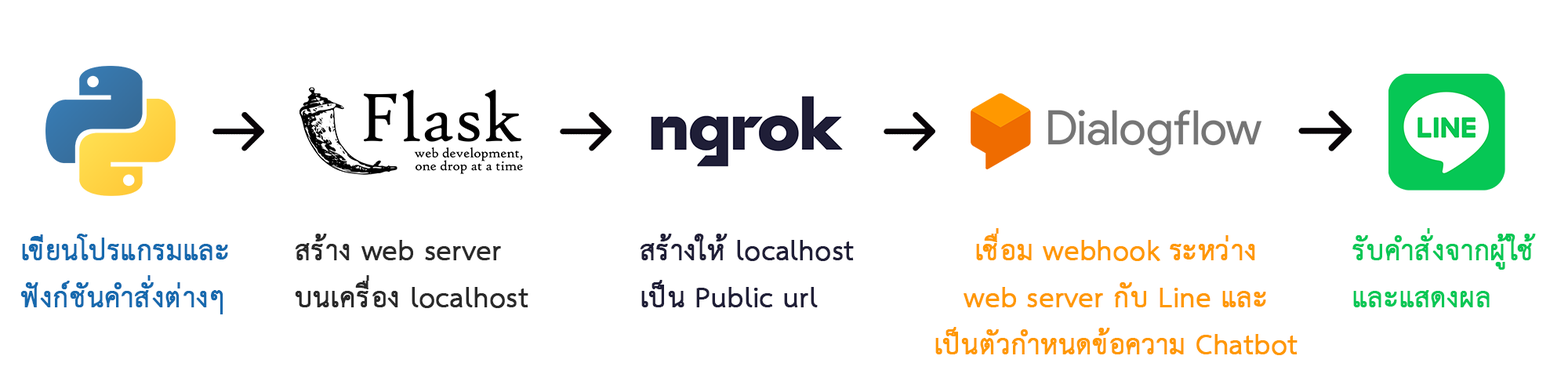
<style>
.page{position:relative;width:1568px;height:392px;background:#ffffff}
.page>*{position:absolute;margin:0}
.t1{font:39.2px "THSarabunNew";color:#1669ae;font-weight:bold}
.t2{font:39.2px "THSarabunNew";color:#292929;font-weight:bold}
.t3{font:39.2px "THSarabunNew";color:#1f1e37;font-weight:bold}
.t4{font:39.2px "THSarabunNew";color:#ff9800;font-weight:bold}
.t5{font:39.2px "THSarabunNew";color:#06c755;font-weight:bold}
</style>
<div class="page">
<p class="t1" style="left:20px;top:234px;width:208px;height:80px">เขียนโปรแกรมและ<br>ฟังก์ชันคำสั่งต่างๆ</p>
<p class="t2" style="left:295px;top:234px;width:233px;height:74px">สร้าง web server<br>บนเครื่อง localhost</p>
<p class="t3" style="left:641px;top:234px;width:213px;height:73px">สร้างให้ localhost <br>เป็น Public url</p>
<p class="t4" style="left:935px;top:228px;width:363px;height:127px;text-align:center">เชื่อม webhook ระหว่าง<br>web server กับ Line และ<br>เป็นตัวกำหนดข้อความ Chatbot</p>
<p class="t5" style="left:1352px;top:228px;width:184px;height:79px">รับคำสั่งจากผู้ใช้ <br>และแสดงผล</p>
</div>
